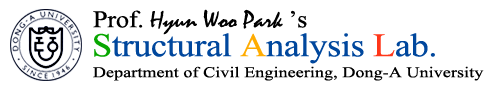
<style>
.page{position:relative;width:500px;height:87px;background:#ffffff}
.page>*{position:absolute;margin:0}
.t1{font:24px "Mistral";letter-spacing:-0.01em;color:#000000;scale:1.1 1}
.t2{font:24px "TimesNewRomanPSMT";letter-spacing:-0.01em;color:#000000;scale:1.1 1}
.t3{font:33px "TimesNewRomanPSMT";letter-spacing:-0.01em;color:#00479d;scale:1.1 1}
.t4{font:33px "TimesNewRomanPSMT";letter-spacing:-0.01em;color:#07a700;scale:1.1 1}
.t5{font:33px "TimesNewRomanPSMT";letter-spacing:-0.01em;color:#ffac01;scale:1.1 1}
.t6{font:33px "TimesNewRomanPSMT";letter-spacing:-0.01em;color:#ff3619;scale:1.1 1}
.t7{font:15px "TimesNewRomanPSMT";letter-spacing:0.005em;color:#000000;scale:1.2 1}
</style>
<div class="page">
<p class="t1" style="left:93px;top:9px;width:214px;height:26px"><span class="t2">Prof. </span>Hyun Woo Park<span class="t2"> ’s</span></p>
<p class="t3" style="left:94px;top:33px;width:341px;height:31px"><span class="t4">S</span>tructural <span class="t5">A</span>nalysis <span class="t6">L</span>ab.</p>
<p class="t7" style="left:93px;top:66px;width:391px;height:15px">Department of Civil Engineering, Dong-A University</p>
</div>
